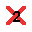
<style>
.page{position:relative;width:32px;height:32px;background:#ffffff}
.page>*{position:absolute;margin:0}
.t1{font:14px "Arial-BoldMT";color:#000000}
</style>
<div class="page">
<p class="t1" style="left:13px;top:11px;width:7px;height:11px">2</p>
</div>
